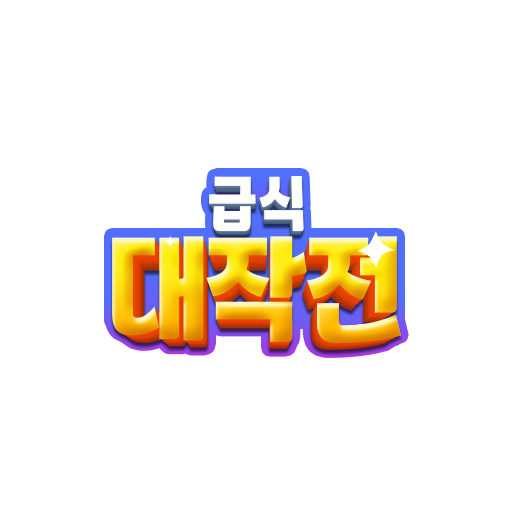
<style>
.page{position:relative;width:512px;height:512px;background:#ffffff}
.page>*{position:absolute;margin:0}
.t1{font:68.3px "TTWanjudaedunsancheB";letter-spacing:0.025em;color:#fdfffd;scale:0.77 1}
.t2{font:69px "TTWanjudaedunsancheB";letter-spacing:0.025em;color:#fdfffd;scale:0.77 1}
.t3{font:69.7px "TTWanjudaedunsancheB";letter-spacing:0.025em;color:#fdfffd;scale:0.77 1}
.t4{font:70.4px "TTWanjudaedunsancheB";letter-spacing:0.025em;color:#fdfffd;scale:0.77 1}
.t5{font:67.6px "TTWanjudaedunsancheB";letter-spacing:0.025em;scale:0.77 1}
.t6{font:67px "TTWanjudaedunsancheB";letter-spacing:0.025em;scale:0.77 1}
.t7{font:135px "TTWanjudaedunsancheB";letter-spacing:-0.025em;scale:0.83 1}
.t8{font:132.3px "TTWanjudaedunsancheB";letter-spacing:-0.025em;scale:0.83 1}
.t9{font:129.7px "TTWanjudaedunsancheB";letter-spacing:-0.025em;scale:0.83 1}
.t10{font:127.1px "TTWanjudaedunsancheB";letter-spacing:-0.025em;scale:0.83 1}
.t11{font:124.5px "TTWanjudaedunsancheB";letter-spacing:-0.025em;scale:0.83 1}
.t12{font:122px "TTWanjudaedunsancheB";letter-spacing:-0.025em;scale:0.83 1}
</style>
<div class="page">
<p class="t1" style="left:209px;top:179px;width:93px;height:55px">급식</p>
<p class="t2" style="left:209px;top:178px;width:94px;height:55px">급식</p>
<p class="t3" style="left:209px;top:177px;width:94px;height:55px">급식</p>
<p class="t4" style="left:209px;top:176px;width:95px;height:56px">급식</p>
<p class="t1" style="left:209px;top:179px;width:93px;height:55px">급식</p>
<p class="t2" style="left:209px;top:178px;width:94px;height:55px">급식</p>
<p class="t3" style="left:209px;top:177px;width:94px;height:55px">급식</p>
<p class="t4" style="left:209px;top:176px;width:95px;height:56px">급식</p>
<p class="t5" style="left:210px;top:181px;width:92px;height:54px">급식</p>
<p class="t5" style="left:210px;top:181px;width:92px;height:54px">급식</p>
<p class="t6" style="left:211px;top:182px;width:91px;height:53px">급식</p>
<p class="t6" style="left:211px;top:182px;width:91px;height:53px">급식</p>
<p class="t7" style="left:112px;top:236px;width:289px;height:108px">대작전</p>
<p class="t7" style="left:112px;top:236px;width:289px;height:108px">대작전</p>
<p class="t8" style="left:115px;top:239px;width:283px;height:105px">대작전</p>
<p class="t8" style="left:115px;top:239px;width:283px;height:105px">대작전</p>
<p class="t9" style="left:117px;top:243px;width:278px;height:103px">대작전</p>
<p class="t9" style="left:117px;top:243px;width:278px;height:103px">대작전</p>
<p class="t10" style="left:120px;top:245px;width:273px;height:102px">대작전</p>
<p class="t10" style="left:120px;top:245px;width:273px;height:102px">대작전</p>
<p class="t11" style="left:122px;top:249px;width:268px;height:100px">대작전</p>
<p class="t11" style="left:122px;top:249px;width:268px;height:100px">대작전</p>
<p class="t12" style="left:125px;top:253px;width:262px;height:97px">대작전</p>
<p class="t12" style="left:125px;top:253px;width:262px;height:97px">대작전</p>
</div>
